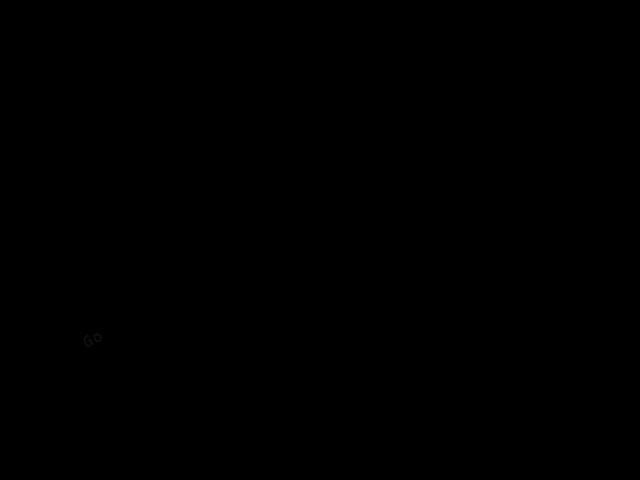
<style>
.page{position:relative;width:640px;height:480px;background:#000000}
.page>*{position:absolute;margin:0}
.t1{font:14.4px "H2porM";color:#0e0e0c;font-weight:bold}
</style>
<div class="page">
<p class="t1" style="left:83px;top:332px;width:19px;height:15px;rotate:-30deg">Go</p>
</div>
